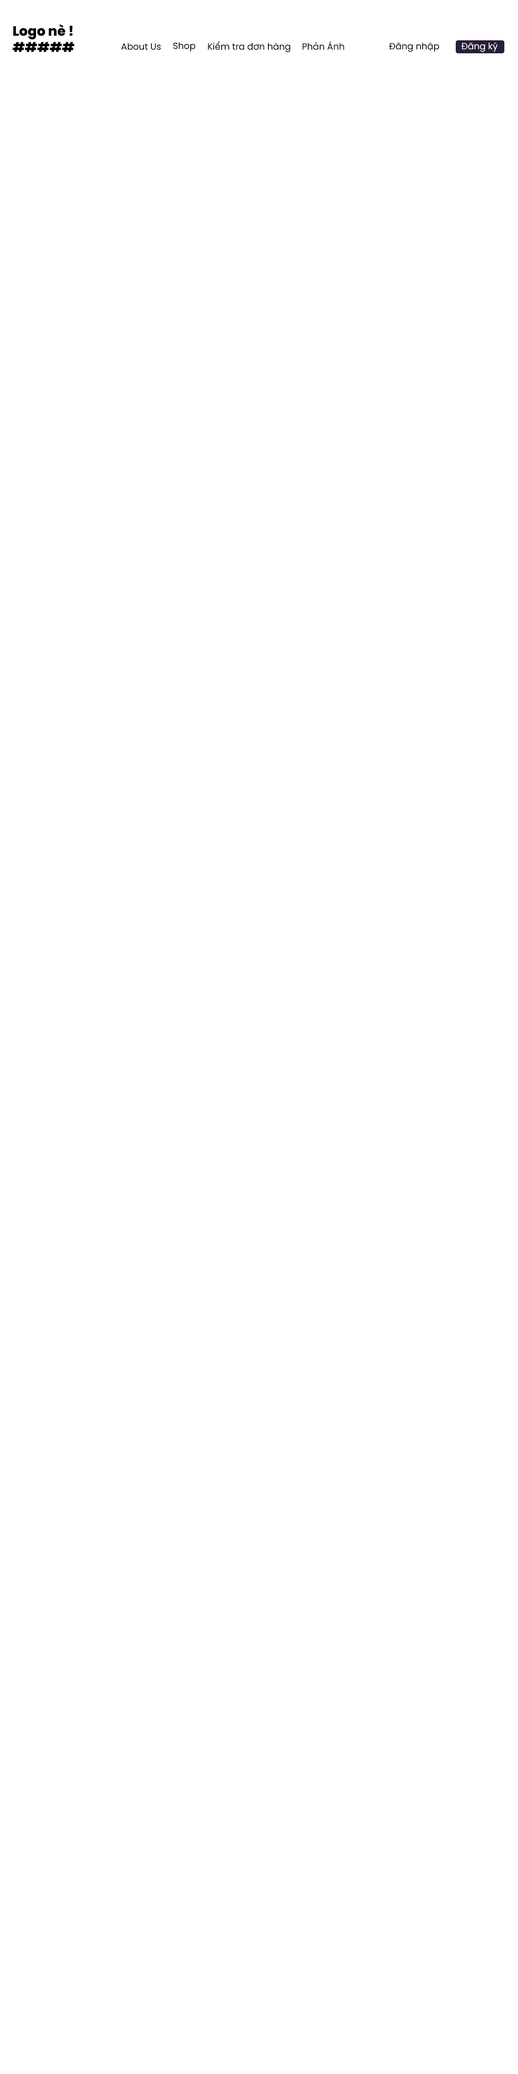
<style>
.page{position:relative;width:518px;height:2074px;background:#ffffff}
.page>*{position:absolute;margin:0}
.t1{font:13.5px "DVNPoppins-ExtraBold";color:#000000}
.t2{font:9px "DVNPoppins-Regular";color:#000000}
.t3{font:9px "DVNPoppins-Regular";color:#ffffff}
</style>
<div class="page">
<p class="t1" style="left:13px;top:24px;width:62px;height:28px">Logo nè !<br>#####</p>
<p class="t2" style="left:208px;top:41px;width:83px;height:11px">Kiểm tra đơn hàng</p>
<p class="t2" style="left:303px;top:41px;width:42px;height:9px">Phản Ánh</p>
<p class="t2" style="left:121px;top:43px;width:40px;height:7px">About Us</p>
<p class="t2" style="left:173px;top:42px;width:22px;height:9px">Shop</p>
<p class="t2" style="left:389px;top:42px;width:51px;height:10px">Đăng nhập</p>
<p class="t3" style="left:462px;top:42px;width:36px;height:10px">Đăng ký</p>
</div>
